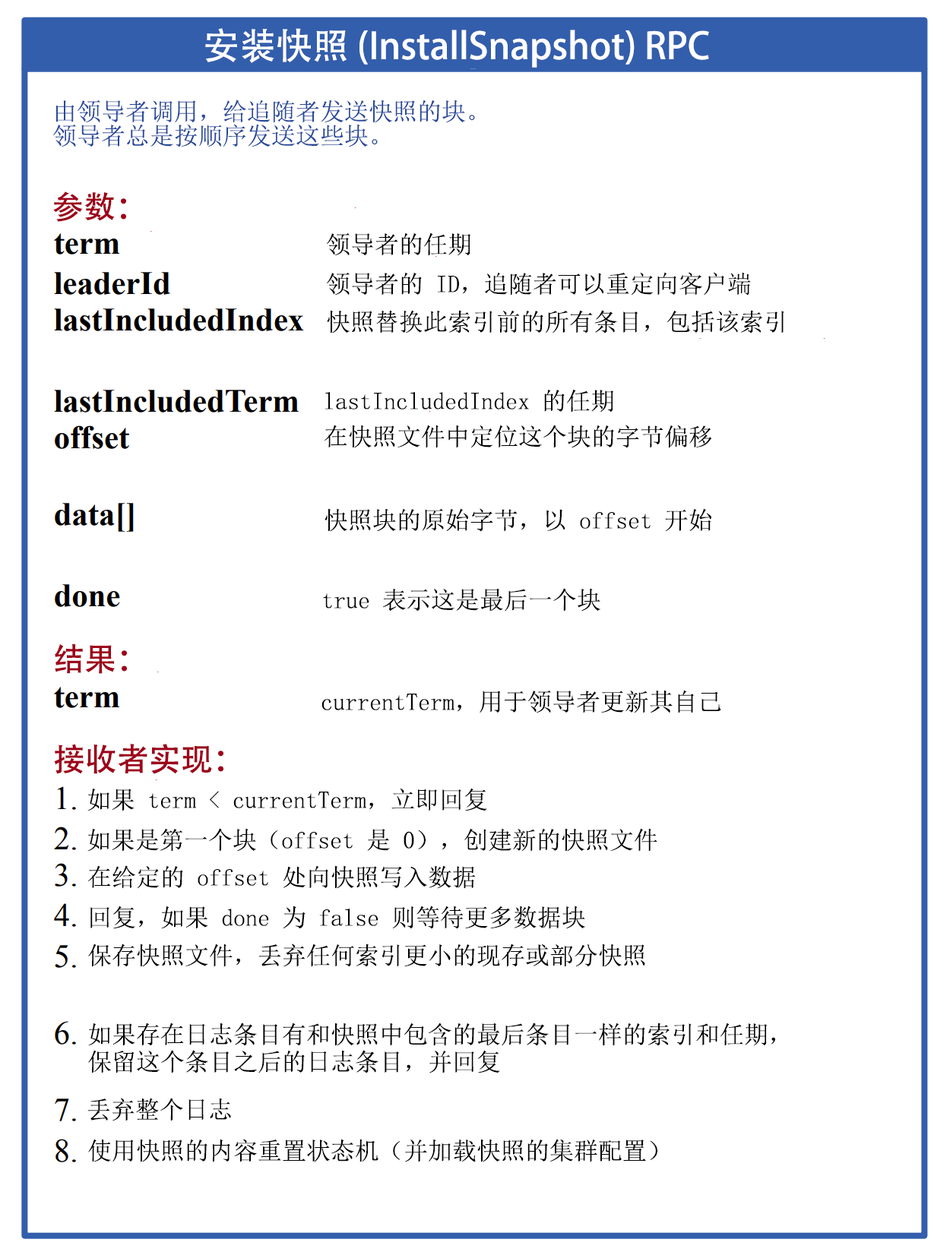
<style>
.page{position:relative;width:950px;height:1255px;background:#ffffff}
.page>*{position:absolute;margin:0}
.t1{font:36.5px "AdobeHeitiStd-Regular";color:#ffffff}
.t2{font:24.3px/12.2px "NSimSun";color:#28499b}
.t3{font:31.9px "AdobeHeitiStd-Regular";color:#9e001a}
.t4{font:24.3px "NSimSun";color:#010000}
.t5{font:24.3px/27.4px "NSimSun";color:#010000}
</style>
<div class="page">
<p class="t1" style="left:205px;top:28px;width:504px;height:40px">安装快照 (InstallSnapshot) RPC</p>
<p class="t2" style="left:53px;top:100px;width:422px;height:47px">由领导者调用，给追随者发送快照的块。<br><br>领导者总是按顺序发送这些块。</p>
<p class="t3" style="left:53px;top:191px;width:73px;height:31px">参数：</p>
<p class="t4" style="left:327px;top:233px;width:143px;height:23px">领导者的任期</p>
<p class="t4" style="left:327px;top:272px;width:424px;height:24px">领导者的 ID，追随者可以重定向客户端</p>
<p class="t4" style="left:327px;top:310px;width:457px;height:24px">快照替换此索引前的所有条目，包括该索引</p>
<p class="t4" style="left:325px;top:389px;width:288px;height:24px">lastIncludedIndex 的任期</p>
<p class="t4" style="left:324px;top:425px;width:388px;height:23px">在快照文件中定位这个块的字节偏移</p>
<p class="t4" style="left:324px;top:508px;width:387px;height:24px">快照块的原始字节，以 offset 开始</p>
<p class="t4" style="left:323px;top:588px;width:277px;height:24px">true 表示这是最后一个块</p>
<p class="t3" style="left:55px;top:644px;width:72px;height:30px">结果：</p>
<p class="t4" style="left:321px;top:690px;width:400px;height:24px">currentTerm，用于领导者更新其自己</p>
<p class="t3" style="left:54px;top:744px;width:169px;height:30px">接收者实现：</p>
<p class="t4" style="left:87px;top:788px;width:400px;height:24px">如果 term &lt; currentTerm，立即回复</p>
<p class="t4" style="left:87px;top:828px;width:570px;height:24px">如果是第一个块（offset 是 0），创建新的快照文件</p>
<p class="t4" style="left:88px;top:866px;width:388px;height:23px">在给定的 offset 处向快照写入数据</p>
<p class="t4" style="left:90px;top:906px;width:495px;height:23px">回复，如果 done 为 false 则等待更多数据块</p>
<p class="t4" style="left:88px;top:944px;width:557px;height:23px">保存快照文件，丢弃任何索引更小的现存或部分快照</p>
<p class="t5" style="left:88px;top:1023px;width:687px;height:51px">如果存在日志条目有和快照中包含的最后条目一样的索引和任期，<br>保留这个条目之后的日志条目，并回复</p>
<p class="t4" style="left:87px;top:1098px;width:144px;height:24px">丢弃整个日志</p>
<p class="t4" style="left:88px;top:1139px;width:569px;height:24px">使用快照的内容重置状态机（并加载快照的集群配置）</p>
</div>
